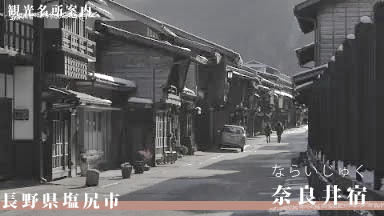
<style>
.page{position:relative;width:384px;height:216px}
.page>*{position:absolute;margin:0}
.t1{font:12px "KozMinPr6N-Heavy";letter-spacing:0.2em;color:#ffffff}
.t2{font:13.6px "KozGoPro-Light";letter-spacing:0.2em;color:#ffffff}
.t3{font:21px "KozMinPr6N-Heavy";letter-spacing:0.2em;color:#ffffff}
.t4{font:17px "KozMinPr6N-Heavy";letter-spacing:0.2em;color:#ffffff}
</style>
<div class="page">
<p class="t1" style="left:8px;top:4px;width:84px;height:13px">観光名所案内</p>
<p class="t2" style="left:272px;top:164px;width:92px;height:14px">ならいじゅく</p>
<p class="t3" style="left:271px;top:185px;width:96px;height:21px">奈良井宿</p>
<p class="t4" style="left:1px;top:192px;width:119px;height:17px">長野県塩尻市</p>
</div>
